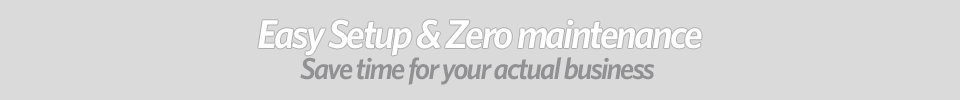
<style>
.page{position:relative;width:960px;height:100px;background:#dadada}
.page>*{position:absolute;margin:0}
.t1{font:40.3px "Whitney-SemiboldItalic";letter-spacing:-0.06em;color:#ffffff}
.t2{font:30.3px "Whitney-SemiboldItalic";letter-spacing:-0.06em;color:#919092}
</style>
<div class="page">
<p class="t1" style="left:258px;top:19px;width:444px;height:37px">Easy Setup &amp; Zero maintenance</p>
<p class="t2" style="left:300px;top:57px;width:355px;height:28px">Save time for your actual business</p>
</div>
